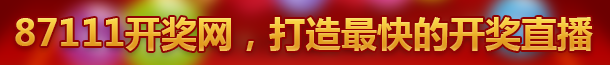
<style>
.page{position:relative;width:610px;height:65px}
.page>*{position:absolute;margin:0}
.t1{font:36px "MicrosoftYaHei-Bold"}
</style>
<div class="page">
<p class="t1" style="left:15px;top:17px;width:578px;height:34px">87111开奖网，打造最快的开奖直播</p>
</div>
